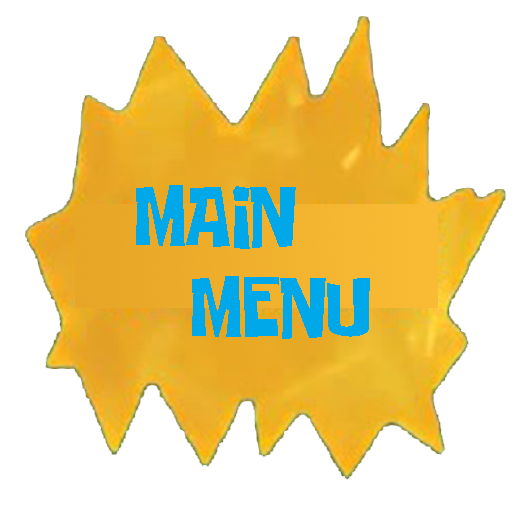
<style>
.page{position:relative;width:512px;height:512px;background:#ffffff}
.page>*{position:absolute;margin:0}
.t1{font:60px "SpongeboyRegular";color:#00a7e9}
</style>
<div class="page">
<p class="t1" style="left:136px;top:185px;width:160px;height:64px">MAIN</p>
<p class="t1" style="left:192px;top:276px;width:178px;height:63px">MENU</p>
</div>
